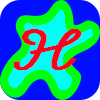
<style>
.page{position:relative;width:100px;height:100px;background:#020eff}
.page>*{position:absolute;margin:0}
.t1{font:60px "SWScrps";color:#fe011f;font-weight:bold;scale:1.5 1}
</style>
<div class="page">
<p class="t1" style="left:14px;top:29px;width:68px;height:41px">H</p>
</div>
